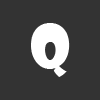
<style>
.page{position:relative;width:100px;height:100px;background:#333333}
.page>*{position:absolute;margin:0}
.t1{font:58.3px "ShowcardGothic-Reg";color:#ffffff}
</style>
<div class="page">
<p class="t1" style="left:31px;top:23px;width:39px;height:54px">q</p>
</div>
